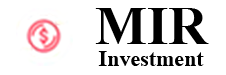
<style>
.page{position:relative;width:226px;height:75px;background:#ffffff}
.page>*{position:absolute;margin:0}
.t1{font:55px "David-Bold";color:#000000}
.t2{font:22px "David-Bold";color:#000000}
</style>
<div class="page">
<p class="t1" style="left:95px;top:8px;width:114px;height:36px">MIR</p>
<p class="t2" style="left:98px;top:51px;width:106px;height:15px">Investment</p>
</div>
